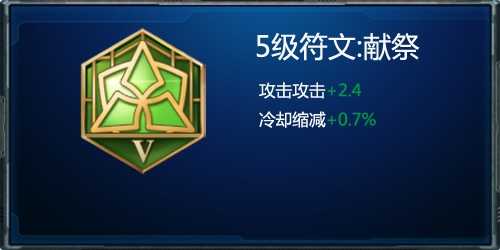
<style>
.page{position:relative;width:500px;height:250px}
.page>*{position:absolute;margin:0}
.t1{font:28.3px "MicrosoftYaHei";color:#f7faf8}
.t2{font:16.7px "MicrosoftYaHei";color:#f7faf8}
.t3{font:16.7px "MicrosoftYaHei";color:#009944}
</style>
<div class="page">
<p class="t1" style="left:256px;top:32px;width:164px;height:96px;text-align:center">5级符文:献祭<br><span class="t2">  攻击攻击</span><span class="t3">+2.4<br></span><span class="t2">  冷却缩减</span><span class="t3">+0.7%</span></p>
</div>
